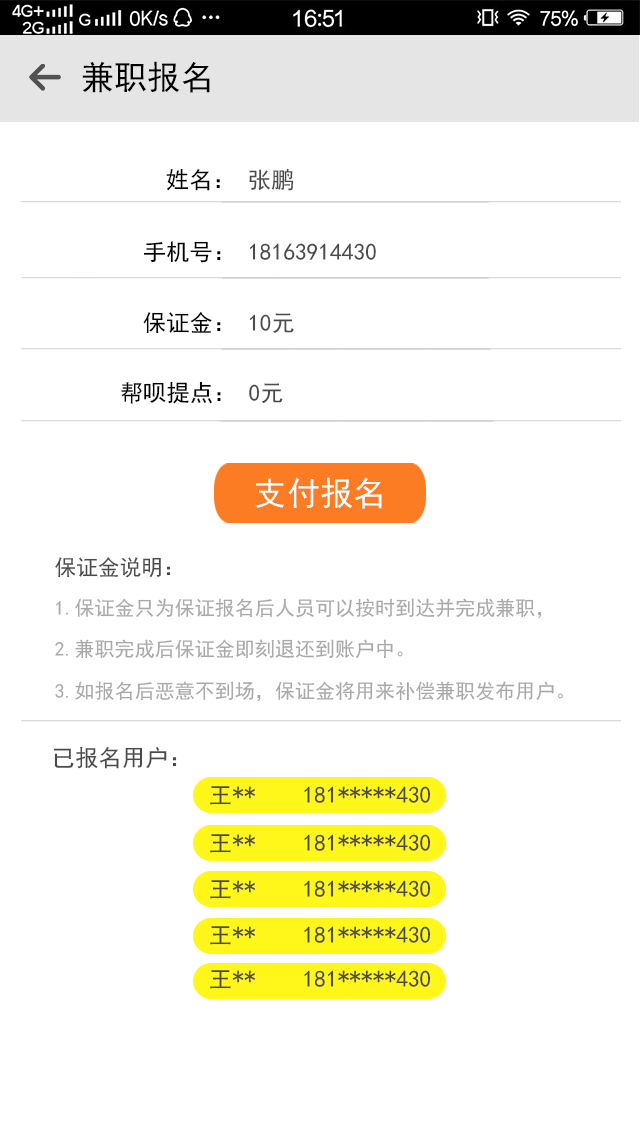
<style>
.page{position:relative;width:640px;height:1136px;background:#ffffff}
.page>*{position:absolute;margin:0}
.t1{font:33.3px "SimHei";letter-spacing:0.002em;color:#000000}
.t2{font:23.3px "SimHei";letter-spacing:0.002em;color:#000000}
.t3{font:23.3px "SimHei";letter-spacing:0.002em;color:#4b4b4b}
.t4{font:23.3px "SimHei";letter-spacing:0.002em;color:#010101}
.t5{font:33.3px "SimHei";letter-spacing:0.002em;color:#ffffff}
.t6{font:20px/41.5px "SimHei";letter-spacing:0.002em;color:#a9a9a9}
.t7{font:21.7px/41.5px "SimHei";letter-spacing:0.002em;color:#4b4b4b}
</style>
<div class="page">
<p class="t1" style="left:82px;top:61px;width:128px;height:32px">兼职报名</p>
<p class="t2" style="left:166px;top:168px;width:128px;height:23px">姓名： <span class="t3">张鹏</span></p>
<p class="t3" style="left:143px;top:241px;width:233px;height:22px"><span class="t4">手机号： </span>18163914430</p>
<p class="t2" style="left:143px;top:312px;width:151px;height:22px">保证金： <span class="t3">10元</span></p>
<p class="t2" style="left:121px;top:381px;width:162px;height:23px">帮呗提点： <span class="t3">0元</span></p>
<p class="t5" style="left:255px;top:477px;width:127px;height:32px">支付报名</p>
<p class="t6" style="left:55px;top:557px;width:508px;height:144px"><span class="t7">保证金说明：<br></span>1.保证金只为保证报名后人员可以按时到达并完成兼职，<br>2.兼职完成后保证金即刻退还到账户中。<br>3.如报名后恶意不到场，保证金将用来补偿兼职发布用户。</p>
<p class="t3" style="left:53px;top:746px;width:124px;height:23px">已报名用户：</p>
<p class="t3" style="left:210px;top:786px;width:221px;height:19px">王**    181*****430</p>
<p class="t3" style="left:210px;top:834px;width:221px;height:19px">王**    181*****430</p>
<p class="t3" style="left:210px;top:880px;width:221px;height:19px">王**    181*****430</p>
<p class="t3" style="left:210px;top:926px;width:221px;height:19px">王**    181*****430</p>
<p class="t3" style="left:210px;top:970px;width:221px;height:19px">王**    181*****430</p>
</div>
